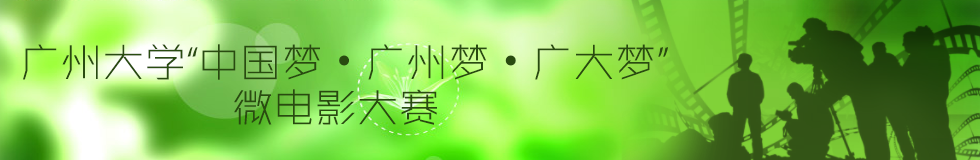
<style>
.page{position:relative;width:980px;height:160px}
.page>*{position:absolute;margin:0}
.t1{font:41.7px "ZHSRXT--GBK1-0";color:#294b10}
.t2{font:41.7px "AdobeHeitiStd-Regular";color:#294b10}
</style>
<div class="page">
<p class="t1" style="left:23px;top:44px;width:645px;height:36px">广州大学“中国梦<span class="t2">•</span>广州梦<span class="t2">•</span>广大梦”</p>
<p class="t1" style="left:234px;top:89px;width:203px;height:36px">微电影大赛</p>
</div>
